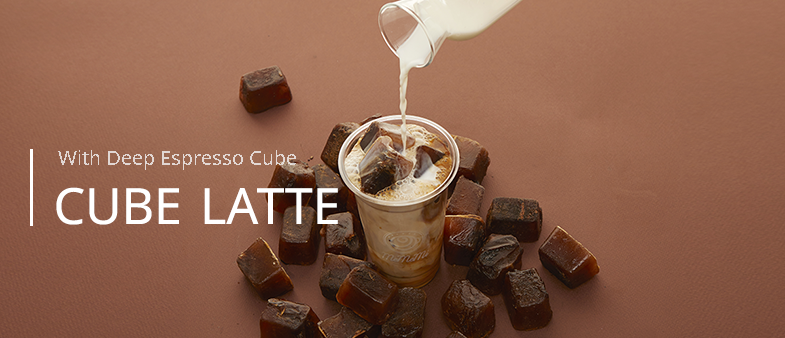
<style>
.page{position:relative;width:785px;height:338px}
.page>*{position:absolute;margin:0}
.t1{font:20px "NotoSans";color:#e2d7d3}
.t2{font:50px "NotoSans";color:#ffffff}
</style>
<div class="page">
<p class="t1" style="left:58px;top:150px;width:238px;height:20px">With Deep Espresso Cube</p>
<p class="t2" style="left:56px;top:187px;width:282px;height:38px">CUBE LATTE</p>
</div>
